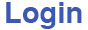
<style>
.page{position:relative;width:88px;height:30px;background:#ffffff}
.page>*{position:absolute;margin:0}
.t1{font:29px "SansSerifBold";color:#3c58b2}
</style>
<div class="page">
<p class="t1" style="left:6px;top:2px;width:76px;height:27px">Login</p>
</div>
